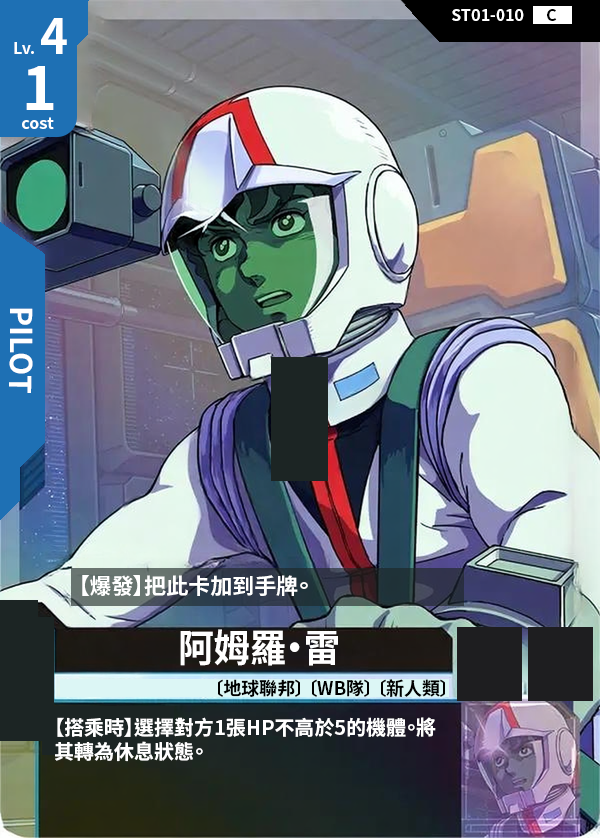
<style>
.page{position:relative;width:600px;height:838px}
.page>*{position:absolute;margin:0}
.t1{font:16px "NotoSansCJKtc-Bold";color:#ffffff}
.t2{font:16px "NotoSansCJKtc-Bold";color:#000000}
.t3{font:48px "NotoSansCJKtc-Bold";color:#ffffff}
.t4{font:60px "NotoSansCJKtc-Bold";color:#ffffff}
.t5{font:30px "NotoSansCJKtc-Bold";color:#ffffff}
.t6{font:22px "NotoSansCJKtc-Bold";color:#ffffff}
.t7{font:38.4px "NotoSansCJKtc-Bold";color:#ffffff;scale:0.94 1}
.t8{font:18px "NotoSansCJKtc-Bold";color:#000000}
.t9{font:20px "NotoSansCJKtc-Bold";color:#ffffff}
</style>
<div class="page">
<p class="t1" style="left:452px;top:9px;width:72px;height:12px">ST01-010</p>
<p class="t2" style="left:547px;top:9px;width:10px;height:12px">C</p>
<p class="t3" style="left:41px;top:18px;width:26px;height:36px">4</p>
<p class="t1" style="left:14px;top:42px;width:20px;height:12px">Lv.</p>
<p class="t4" style="left:26px;top:66px;width:28px;height:44px">1</p>
<p class="t1" style="left:22px;top:117px;width:32px;height:12px">cost</p>
<p class="t5" style="left:9px;top:308px;width:24px;height:85px;rotate:90deg">PILOT</p>
<p class="t6" style="left:82px;top:575px;width:226px;height:22px">【爆發】把此卡加到手牌。</p>
<p class="t7" style="left:180px;top:629px;width:158px;height:37px">阿姆羅・雷</p>
<p class="t8" style="left:218px;top:679px;width:227px;height:18px">〔地球聯邦〕 〔WB隊〕 〔新人類〕</p>
<p class="t9" style="left:55px;top:717px;width:381px;height:45px">【搭乘時】選擇對方1張HP不高於5的機體。將<br>其轉為休息狀態。</p>
</div>
